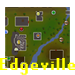
<style>
.page{position:relative;width:75px;height:75px;background:#ffffff}
.page>*{position:absolute;margin:0}
.t1{font:19.1px "RuneScape-UF";letter-spacing:0.1em;color:#ffff00}
</style>
<div class="page">
<p class="t1" style="left:0px;top:58px;width:75px;height:17px">Edgeville</p>
</div>
